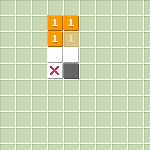
<style>
.page{position:relative;width:150px;height:150px;background:#cad8b3}
.page>*{position:absolute;margin:0}
.t1{font:8px "PressStart2P";color:#ffffff}
.t2{font:8px "PressStart2P";color:#dae4ca}
</style>
<div class="page">
<p class="t1" style="left:52px;top:19px;width:6px;height:7px">1</p>
<p class="t1" style="left:68px;top:19px;width:6px;height:7px">1</p>
<p class="t1" style="left:52px;top:35px;width:6px;height:7px">1</p>
<p class="t2" style="left:68px;top:35px;width:6px;height:7px">1</p>
</div>
